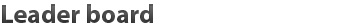
<style>
.page{position:relative;width:345px;height:28px;background:#ffffff}
.page>*{position:absolute;margin:0}
.t1{font:26px "MyriadPro-Bold";color:#464646}
</style>
<div class="page">
<p class="t1" style="left:2px;top:4px;width:151px;height:19px">Leader board</p>
</div>
